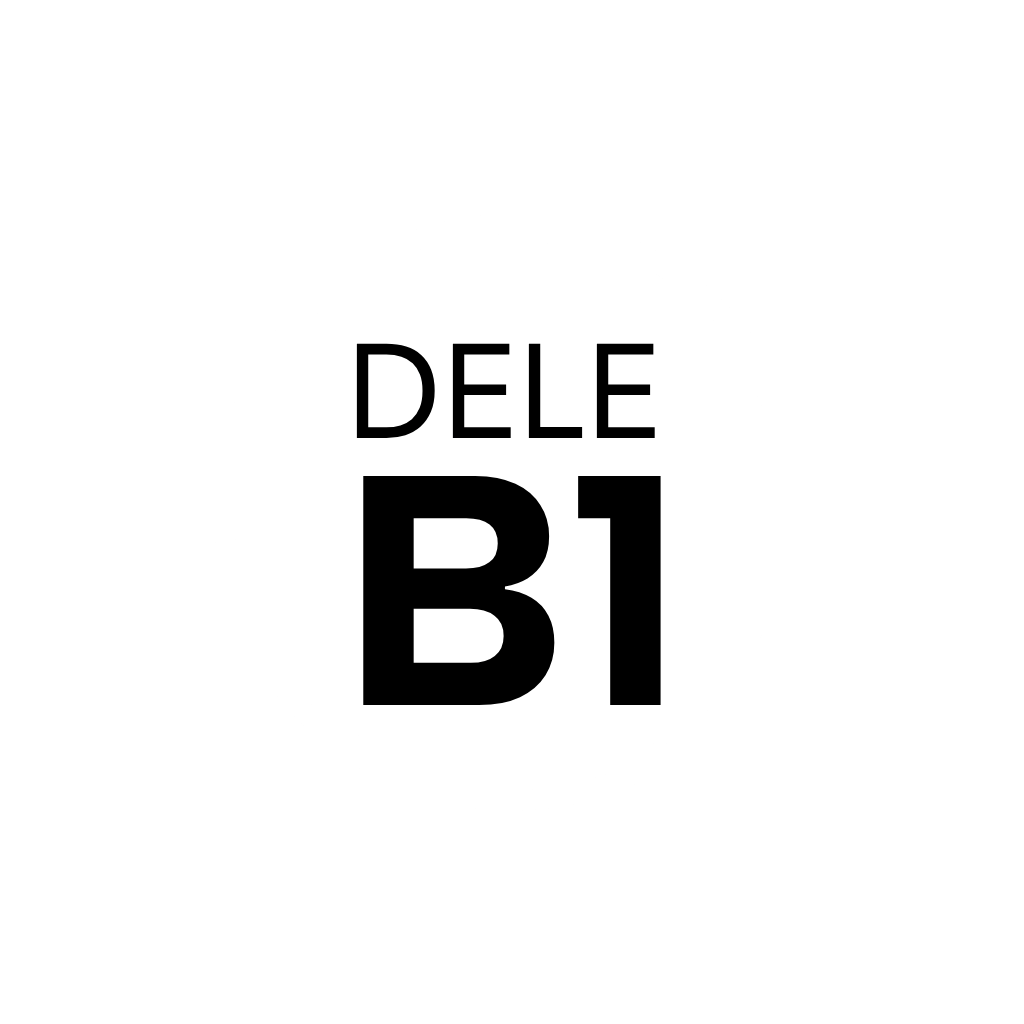
<style>
.page{position:relative;width:1024px;height:1024px;background:#ffffff}
.page>*{position:absolute;margin:0}
.t1{font:138.1px "Actor-Regular";color:#000000}
.t2{font:327.2px "AlbertSans-ExtraBold";color:#000000}
</style>
<div class="page">
<p class="t1" style="left:356px;top:343px;width:299px;height:95px">DELE</p>
<p class="t2" style="left:363px;top:476px;width:298px;height:229px">B1</p>
</div>
